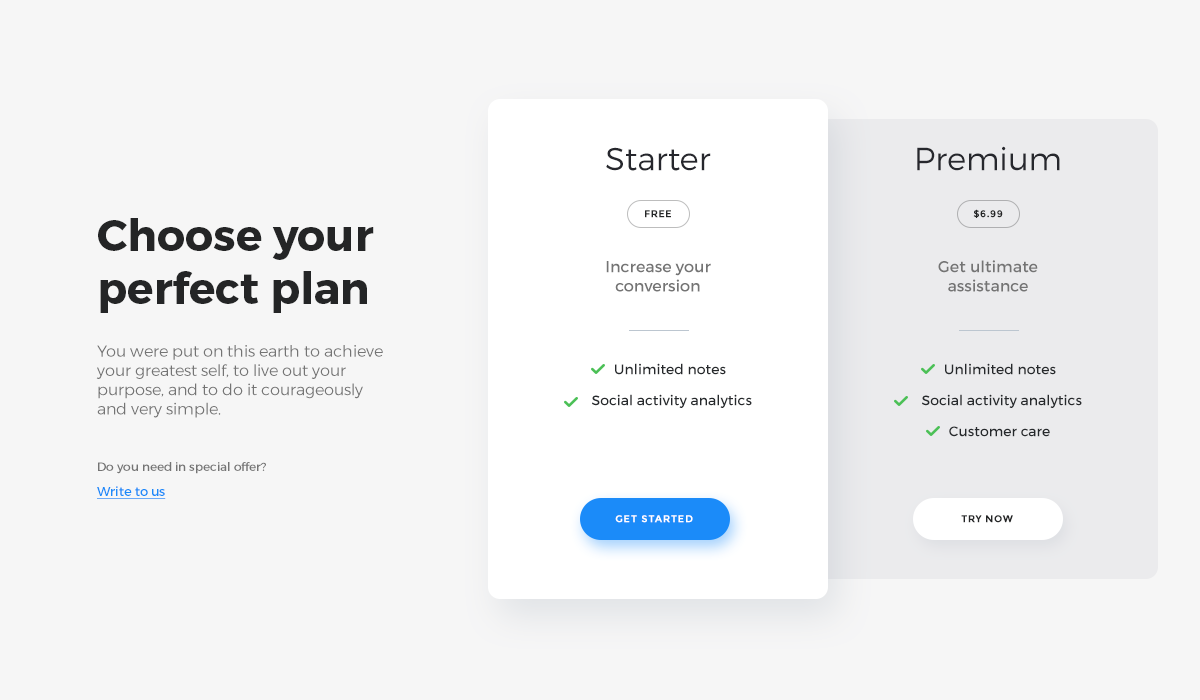
<style>
.page{position:relative;width:1200px;height:700px;background:#f6f6f6}
.page>*{position:absolute;margin:0}
.t1{font:32px "Montserrat-Light";color:#26272d}
.t2{font:10px "Montserrat-Bold";letter-spacing:0.04em;color:#242526;text-transform:uppercase}
.t3{font:44px "Montserrat-Bold";color:#242526}
.t4{font:16px "Montserrat-Regular";color:#747474}
.t5{font:16px "Montserrat-Light";color:#747474}
.t6{font:14px "Montserrat-Regular";color:#26292c}
.t7{font:12px "Montserrat-Regular";color:#747474}
.t8{font:13px "Montserrat-Regular";color:#1b8bf9;text-decoration:underline}
.t9{font:10px "Montserrat-Bold";letter-spacing:0.08em;color:#ffffff;text-transform:uppercase}
.t10{font:10px "Montserrat-Bold";letter-spacing:0.05em;color:#242526;text-transform:uppercase}
</style>
<div class="page">
<p class="t1" style="left:606px;top:147px;width:105px;height:24px">Starter</p>
<p class="t1" style="left:917px;top:146px;width:143px;height:25px">Premium</p>
<p class="t2" style="left:973px;top:209px;width:30px;height:9px">$6.99</p>
<p class="t3" style="left:98px;top:218px;width:276px;height:95px">Choose your <br>perfect plan</p>
<p class="t2" style="left:645px;top:210px;width:26px;height:8px">free</p>
<p class="t4" style="left:606px;top:261px;width:105px;height:31px;text-align:center">Increase your<br>conversion</p>
<p class="t4" style="left:938px;top:260px;width:100px;height:32px;text-align:center">Get ultimate <br>assistance</p>
<p class="t5" style="left:96px;top:345px;width:287px;height:73px">You were put on this earth to achieve your greatest self, to live out your purpose, and to do it courageously<br>and very simple.</p>
<p class="t6" style="left:615px;top:363px;width:111px;height:12px">Unlimited notes</p>
<p class="t6" style="left:945px;top:363px;width:111px;height:12px">Unlimited notes</p>
<p class="t6" style="left:592px;top:394px;width:160px;height:14px">Social activity analytics</p>
<p class="t6" style="left:922px;top:394px;width:160px;height:14px">Social activity analytics</p>
<p class="t6" style="left:949px;top:426px;width:101px;height:11px">Customer care</p>
<p class="t7" style="left:98px;top:462px;width:168px;height:12px">Do you need in special offer?</p>
<p class="t8" style="left:97px;top:486px;width:69px;height:13px">Write to us</p>
<p class="t9" style="left:615px;top:515px;width:78px;height:8px">get started</p>
<p class="t10" style="left:961px;top:515px;width:52px;height:8px">try now</p>
</div>
